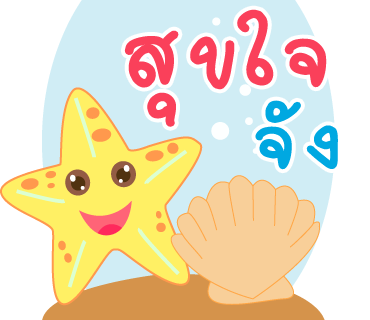
<style>
.page{position:relative;width:370px;height:320px;background:#ffffff}
.page>*{position:absolute;margin:0}
.t1{font:137px "2005_iannnnnMTV";letter-spacing:0.03em;color:#fa405a;scale:1.06 1}
.t2{font:120px "2005_iannnnnMTV";letter-spacing:0.03em;color:#00a8e1;scale:1.06 1}
</style>
<div class="page">
<p class="t1" style="left:124px;top:9px;width:203px;height:118px">สุขใจ</p>
<p class="t2" style="left:255px;top:100px;width:83px;height:70px">จัง</p>
</div>
